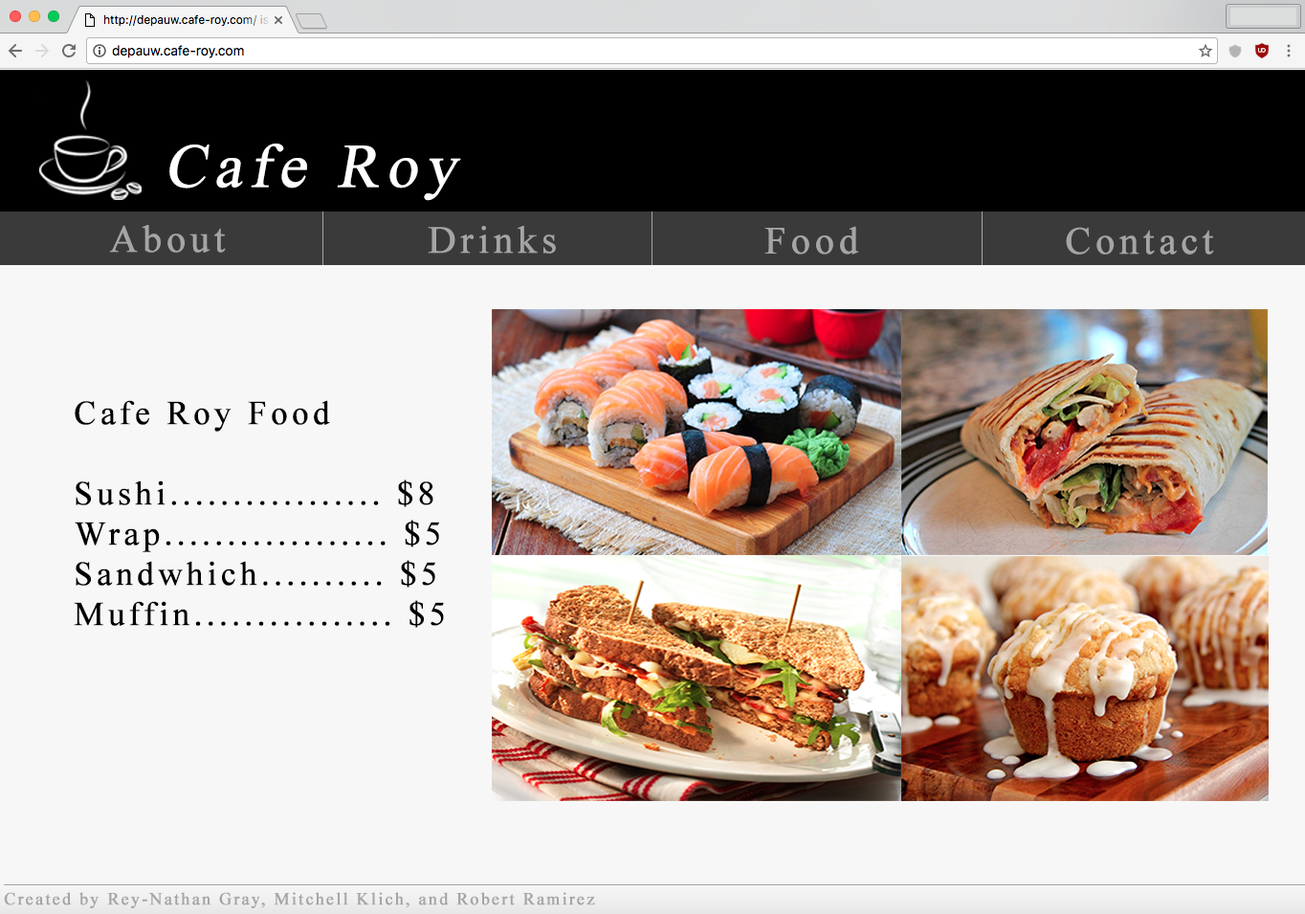
<style>
.page{position:relative;width:1305px;height:914px;background:#f7f7f7}
.page>*{position:absolute;margin:0}
.t1{font:61.7px "TimesNewRomanPSMT";letter-spacing:0.1em;color:#ffffff;font-weight:bold;font-style:italic}
.t2{font:38.3px "TimesNewRomanPSMT";letter-spacing:0.1em;color:#a5a5a5;font-weight:bold}
.t3{font:33.5px "TimesNewRomanPSMT";letter-spacing:0.1em;color:#000000;font-weight:bold}
.t4{font:17.2px "TimesNewRomanPSMT";letter-spacing:0.1em;color:#a5a5a5;font-weight:bold}
</style>
<div class="page">
<p class="t1" style="left:169px;top:144px;width:292px;height:57px">Cafe Roy</p>
<p class="t2" style="left:109px;top:225px;width:117px;height:28px">About</p>
<p class="t2" style="left:428px;top:226px;width:128px;height:28px">Drinks</p>
<p class="t2" style="left:764px;top:226px;width:95px;height:29px">Food</p>
<p class="t2" style="left:1066px;top:227px;width:148px;height:28px">Contact</p>
<p class="t3" style="left:74px;top:400px;width:370px;height:228px">Cafe Roy Food <br><br>Sushi................. $8<br>Wrap.................. $5<br>Sandwhich.......... $5<br>Muffin................ $5</p>
<p class="t4" style="left:4px;top:892px;width:591px;height:16px">Created by Rey-Nathan Gray, Mitchell Klich, and Robert Ramirez</p>
</div>
